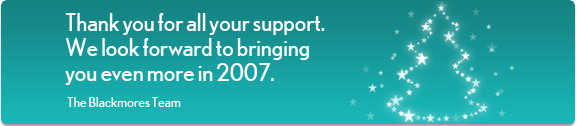
<style>
.page{position:relative;width:577px;height:126px}
.page>*{position:absolute;margin:0}
.t1{font:24px/25px "NobelRegular";letter-spacing:-0.02em;color:#ffffff}
.t2{font:14px "NobelRegular";letter-spacing:-0.02em;color:#ffffff}
</style>
<div class="page">
<p class="t1" style="left:65px;top:13px;width:260px;height:72px">Thank you for all your support. <br>We look forward to bringing <br>you even more in 2007.</p>
<p class="t2" style="left:67px;top:97px;width:114px;height:10px">The Blackmores Team</p>
</div>
